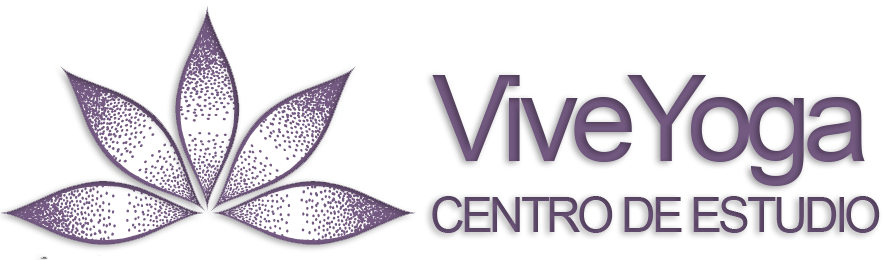
<style>
.page{position:relative;width:885px;height:260px;background:#ffffff}
.page>*{position:absolute;margin:0}
.t1{font:120px "ArialMT";letter-spacing:-0.075em;color:#745a82}
.t2{font:48px "ArialMT";letter-spacing:-0.075em;color:#5d4868}
</style>
<div class="page">
<p class="t1" style="left:432px;top:75px;width:433px;height:111px">ViveYoga</p>
<p class="t2" style="left:432px;top:196px;width:448px;height:37px">CENTRO DE ESTUDIO</p>
</div>
